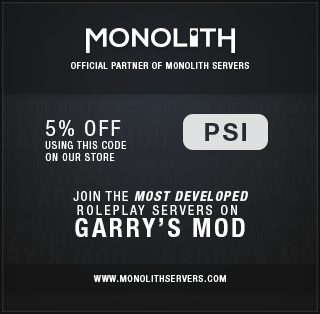
<style>
.page{position:relative;width:320px;height:314px}
.page>*{position:absolute;margin:0}
.t1{font:9px "HelveticaNeueLTStd-Cn";letter-spacing:0.1em;color:#ffffff}
.t2{font:10.1px/12.2px "HelveticaNeueLTStd-Cn";letter-spacing:0.1em;color:#ffffff}
.t3{font:21.8px/12.2px "HelveticaNeueLTStd-Cn";letter-spacing:0.1em;color:#ffffff}
.t4{font:13.3px/13.4px "HelveticaNeueLTStd-Cn";letter-spacing:0.18em;color:#ffffff}
.t5{font:13.3px/13.4px "HelveticaNeueLTStd-Cn";letter-spacing:0.1em;color:#ffffff}
.t6{font:13.3px/13.4px "HelveticaNeueLTStd-BdCnO";letter-spacing:0.1em;color:#ffffff}
.t7{font:25.9px/22.4px "HelveticaNeueLTStd-BdCn";letter-spacing:0.1em;color:#ffffff}
.t8{font:9.4px "HelveticaNeueLTStd-Cn";letter-spacing:0.1em;color:#ffffff}
</style>
<div class="page">
<p class="t1" style="left:71px;top:62px;width:178px;height:7px">OFFICIAL PARTNER OF MONOLITH SERVERS</p>
<p class="t2" style="left:45px;top:120px;width:81px;height:41px"><span class="t3">5% OFF<br></span>USING THIS CODE<br>ON OUR STORE</p>
<p class="t4" style="left:73px;top:191px;width:175px;height:46px;text-align:center"><span class="t5">JOIN THE </span><span class="t6">MOST DEVELOPED<br></span>ROLEPLAY SERVERS ON <br><span class="t7">GARRY’S MOD</span></p>
<p class="t8" style="left:93px;top:275px;width:133px;height:7px">WWW.MONOLITHSERVERS.COM</p>
</div>
